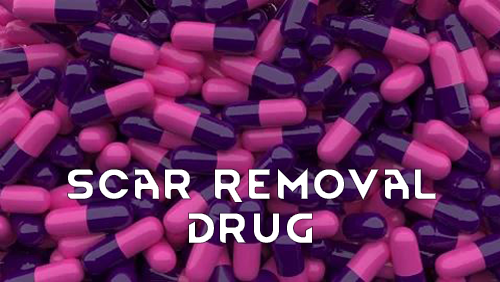
<style>
.page{position:relative;width:500px;height:282px}
.page>*{position:absolute;margin:0}
.t1{font:37.3px "RimWordFont";color:#ffffff;font-weight:bold}
</style>
<div class="page">
<p class="t1" style="left:67px;top:167px;width:370px;height:77px;text-align:center">Scar Removal<br>Drug</p>
</div>
